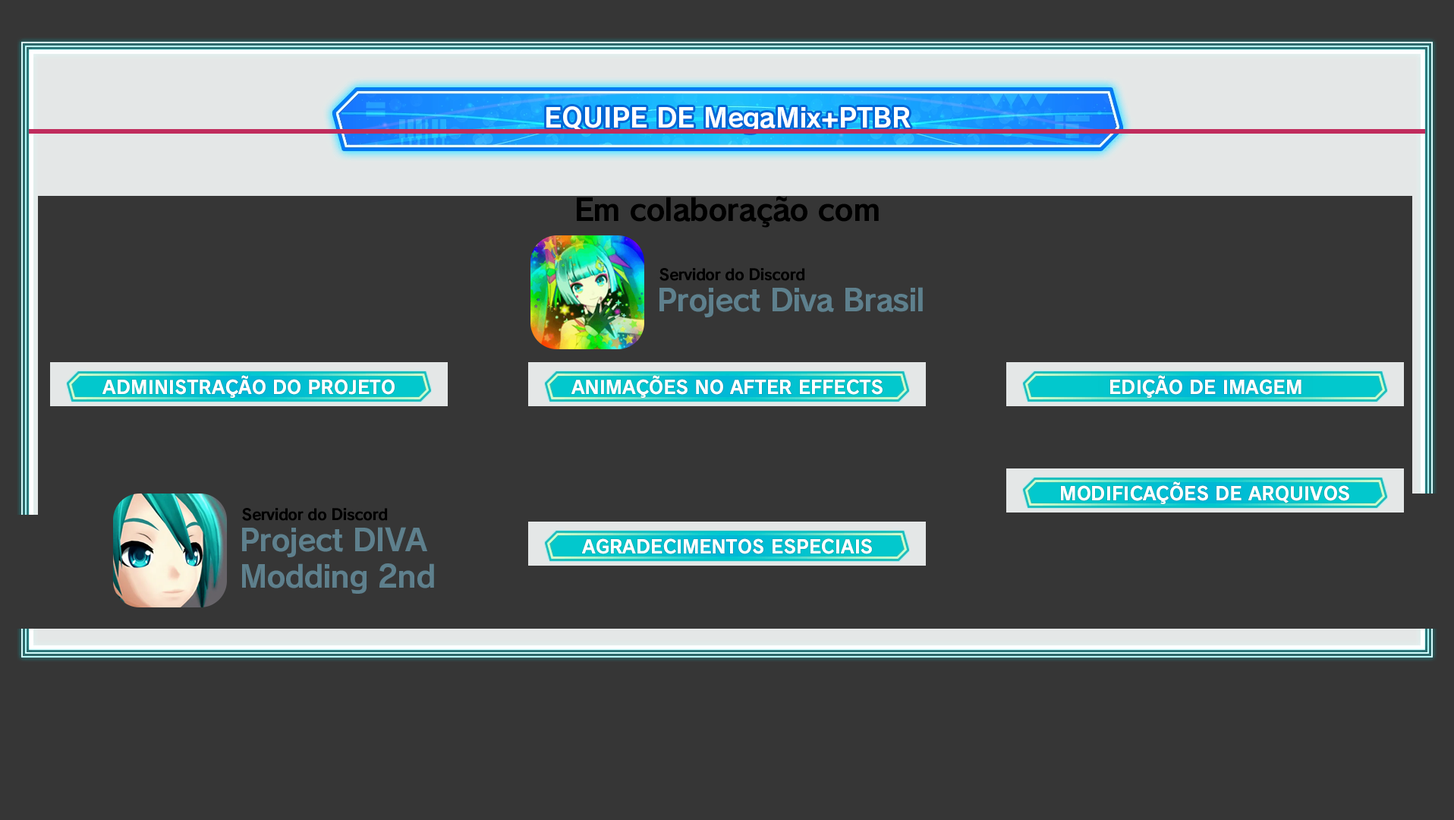
<style>
.page{position:relative;width:1454px;height:820px;background:#363636}
.page>*{position:absolute;margin:0}
.t1{font:26.3px "RodinNTLGPro-B";letter-spacing:-0.011em;color:#ffffff}
.t2{font:30.4px "RodinNTLGPro-B";letter-spacing:-0.034em;color:#000000}
.t3{font:15.2px "RodinNTLGPro-B";letter-spacing:-0.034em;color:#000000}
.t4{font:30.4px "RodinNTLGPro-B";letter-spacing:-0.034em;color:#5e808d}
.t5{font:18.2px "RodinNTLGPro-B";color:#ffffff}
</style>
<div class="page">
<p class="t1" style="left:547px;top:106px;width:364px;height:27px">EQUIPE DE MegaMix+PTBR</p>
<p class="t2" style="left:577px;top:196px;width:302px;height:32px">Em colaboração com</p>
<p class="t3" style="left:660px;top:268px;width:145px;height:13px">Servidor do Discord</p>
<p class="t4" style="left:660px;top:287px;width:263px;height:30px">Project Diva Brasil</p>
<p class="t5" style="left:102px;top:375px;width:293px;height:23px">ADMINISTRAÇÃO DO PROJETO</p>
<p class="t5" style="left:572px;top:375px;width:311px;height:23px">ANIMAÇÕES NO AFTER EFFECTS</p>
<p class="t5" style="left:1111px;top:375px;width:191px;height:23px">EDIÇÃO DE IMAGEM</p>
<p class="t5" style="left:1061px;top:481px;width:289px;height:23px">MODIFICAÇÕES DE ARQUIVOS</p>
<p class="t3" style="left:242px;top:508px;width:146px;height:13px">Servidor do Discord</p>
<p class="t4" style="left:242px;top:527px;width:192px;height:67px">Project DIVA<br>Modding 2nd</p>
<p class="t5" style="left:582px;top:538px;width:290px;height:16px">AGRADECIMENTOS ESPECIAIS</p>
</div>
